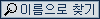
<style>
.page{position:relative;width:100px;height:19px;background:#d8dee3}
.page>*{position:absolute;margin:0}
.t1{font:12px "Gulim";color:#143156}
</style>
<div class="page">
<p class="t1" style="left:21px;top:4px;width:73px;height:11px">이름으로 찾기</p>
</div>
